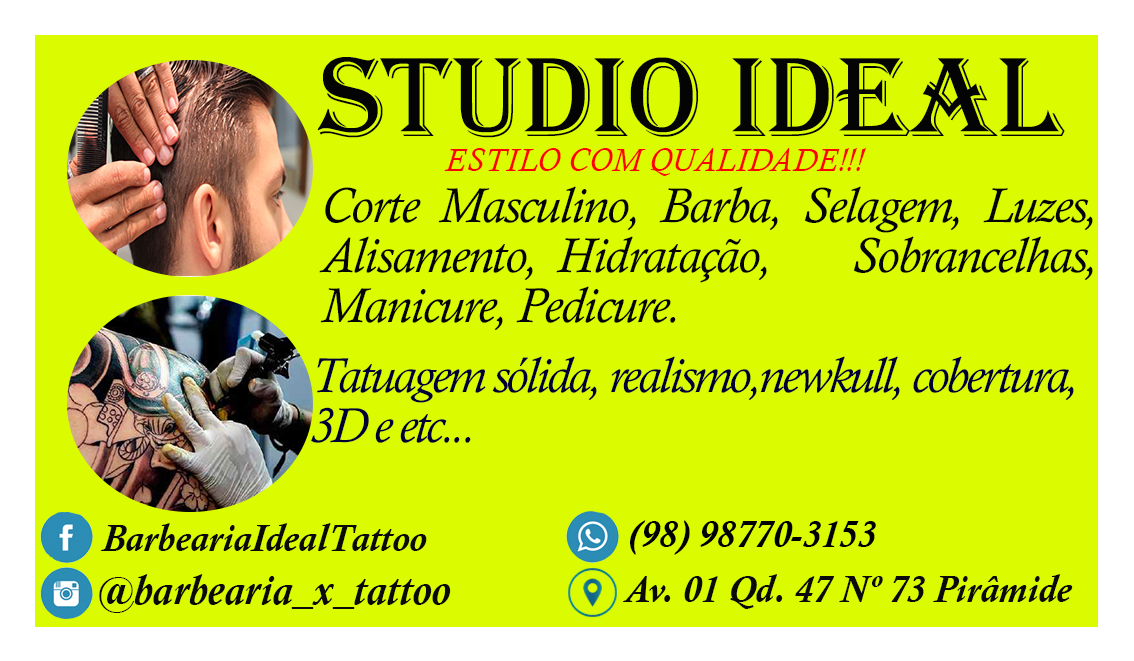
<style>
.page{position:relative;width:1134px;height:661px;background:#dbfb00}
.page>*{position:absolute;margin:0}
.t1{font:116.7px "Algerian";color:#040404}
.t2{font:33.3px "CalistoMT-Italic";color:#fe0303}
.t3{font:50px/50px "CalistoMT-Italic";letter-spacing:-0.025em;color:#040404}
.t4{font:50px/50px "CalistoMT-Italic";letter-spacing:-0.05em;color:#000033}
.t5{font:37.5px "CalistoMT-BoldItalic";color:#000000}
.t6{font:37.5px "CalistoMT-BoldItalic";color:#0a0a09}
.t7{font:41.7px "CalistoMT-BoldItalic";color:#0a0a09}
</style>
<div class="page">
<p class="t1" style="left:317px;top:57px;width:748px;height:81px">STUDIO IDEAL</p>
<p class="t2" style="left:444px;top:148px;width:422px;height:28px">ESTILO COM QUALIDADE!!!</p>
<p class="t3" style="left:319px;top:186px;width:774px;height:145px;text-align:justify">Corte Masculino, Barba, Selagem, Luzes, Alisamento, Hidratação,    Sobrancelhas, Manicure, Pedicure.</p>
<p class="t4" style="left:311px;top:356px;width:763px;height:87px">Tatuagem sólida, realismo,newkull, cobertura, 3D e etc...</p>
<p class="t5" style="left:630px;top:520px;width:246px;height:35px">(98) 98770-3153</p>
<p class="t6" style="left:100px;top:523px;width:327px;height:28px">BarbeariaIdealTattoo</p>
<p class="t7" style="left:99px;top:574px;width:352px;height:39px">@barbearia_x_tattoo</p>
<p class="t6" style="left:622px;top:574px;width:451px;height:35px">Av. 01 Qd. 47 Nº 73 Pirâmide</p>
</div>
